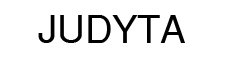
<style>
.page{position:relative;width:250px;height:60px;background:#ffffff}
.page>*{position:absolute;margin:0}
.t1{font:38.4px "SansSerif";letter-spacing:-0.01em;color:#000000;text-transform:uppercase}
</style>
<div class="page">
<p class="t1" style="left:38px;top:15px;width:147px;height:28px">JUDYTA</p>
</div>
